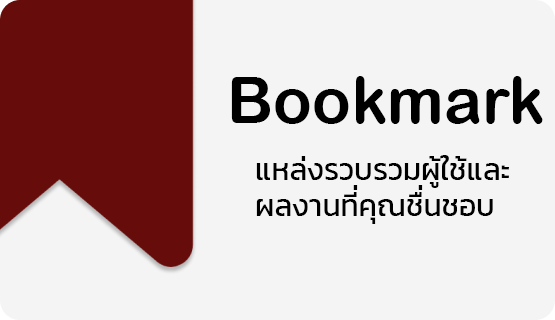
<style>
.page{position:relative;width:555px;height:320px;background:#f4f4f4}
.page>*{position:absolute;margin:0}
.t1{font:64px "ArialRoundedMTBold";color:#000000}
.t2{font:30px "Kanit-Regular";color:#000000}
</style>
<div class="page">
<p class="t1" style="left:231px;top:76px;width:312px;height:48px">Bookmark</p>
<p class="t2" style="left:256px;top:155px;width:253px;height:69px">แหล่งรวบรวมผู้ใช้และ<br>ผลงานทีคุณชืนชอบ</p>
<p class="t2" style="left:353px;top:185px;width:5px;height:5px">่</p>
<p class="t2" style="left:418px;top:185px;width:5px;height:5px">่</p>
</div>
